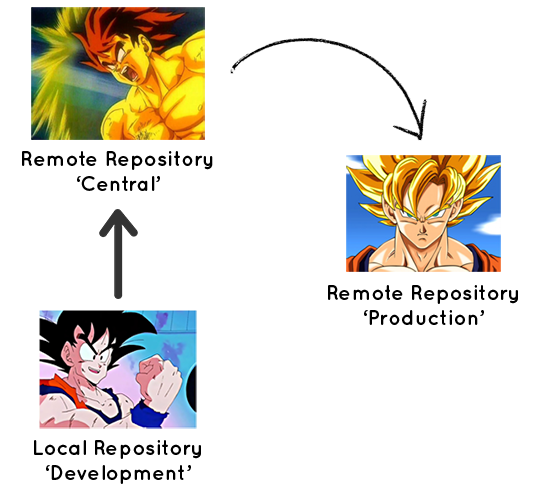
<style>
.page{position:relative;width:533px;height:500px;background:#ffffff}
.page>*{position:absolute;margin:0}
.t1{font:20.8px "Quicksand-Bold";color:#000000}
</style>
<div class="page">
<p class="t1" style="left:22px;top:151px;width:191px;height:40px;text-align:center">Remote Repository<br>‘Central’</p>
<p class="t1" style="left:328px;top:285px;width:190px;height:40px;text-align:center">Remote Repository<br>‘Production’</p>
<p class="t1" style="left:34px;top:440px;width:167px;height:44px;text-align:center">Local Repository<br>‘Development’</p>
</div>
